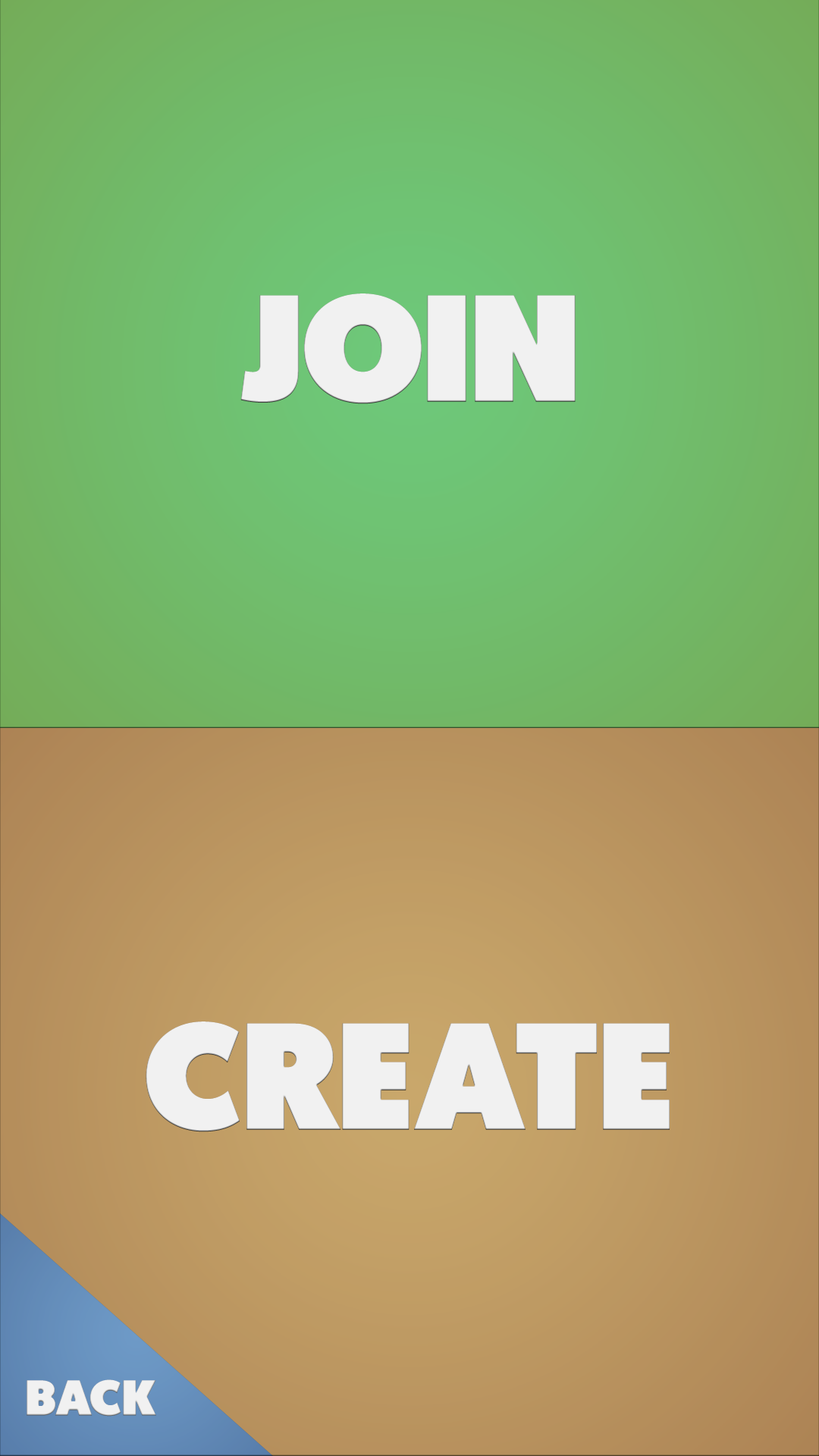
<style>
.page{position:relative;width:819px;height:1456px}
.page>*{position:absolute;margin:0}
.t1{font:151.7px "Geomanist-Ultra";color:#f1f1f1}
.t2{font:50px "Geomanist-Ultra";color:#f1f1f1}
</style>
<div class="page">
<p class="t1" style="left:240px;top:293px;width:336px;height:111px">JOIN</p>
<p class="t1" style="left:146px;top:1021px;width:524px;height:111px">CREATE</p>
<p class="t2" style="left:27px;top:1379px;width:129px;height:38px">BACK</p>
</div>
